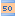
<style>
.page{position:relative;width:16px;height:16px;background:#ffc99a}
.page>*{position:absolute;margin:0}
.t1{font:8px "04b03";color:#3068b3}
</style>
<div class="page">
<p class="t1" style="left:3px;top:6px;width:9px;height:5px">50</p>
</div>
